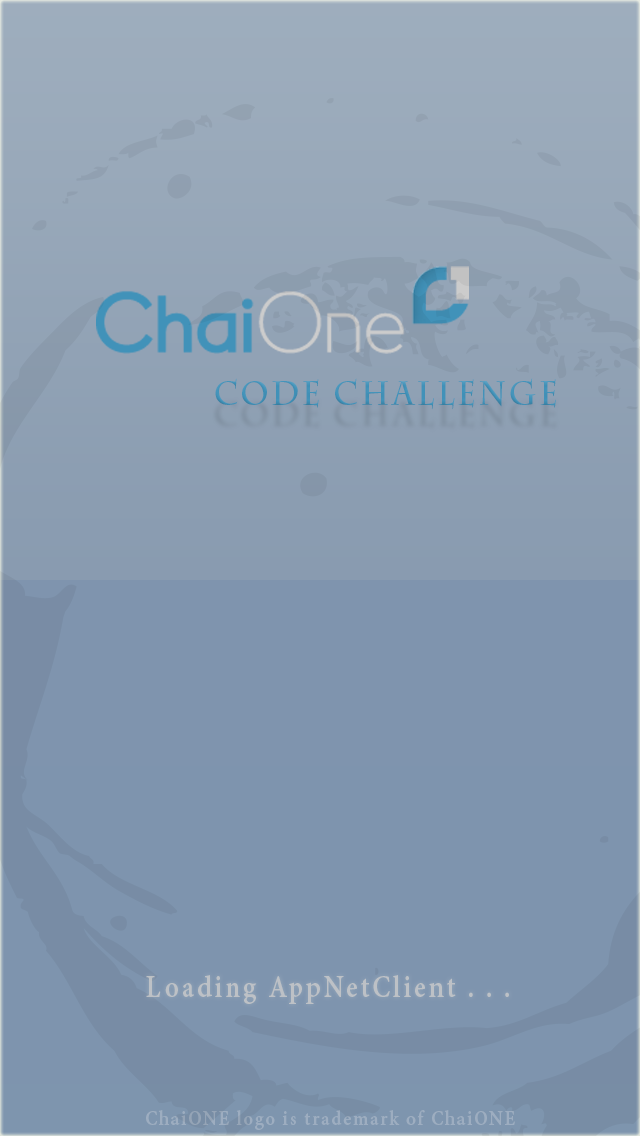
<style>
.page{position:relative;width:640px;height:1136px;background:#7e94ae}
.page>*{position:absolute;margin:0}
.t1{font:33px "CharlemagneStd-Bold";letter-spacing:0.09em;color:#4192b9;scale:0.91 1}
.t2{font:33px "AdobeDevanagari-Bold";letter-spacing:0.09em;color:#bdc1c6;scale:0.91 1}
.t3{font:22px "AdobeDevanagari-Bold";letter-spacing:0.09em;color:#9dadc0;scale:0.91 1}
</style>
<div class="page">
<p class="t1" style="left:215px;top:378px;width:341px;height:32px">Code Challenge</p>
<p class="t2" style="left:146px;top:975px;width:363px;height:29px">Loading AppNetClient . . .</p>
<p class="t3" style="left:146px;top:1110px;width:369px;height:20px">ChaiONE logo is trademark of ChaiONE</p>
</div>
